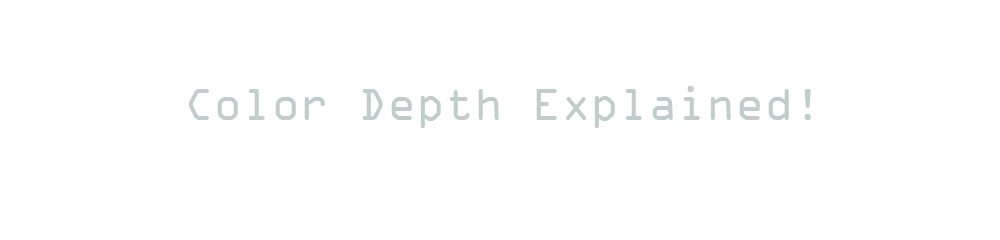
<style>
.page{position:relative;width:1000px;height:240px;background:#ffffff}
.page>*{position:absolute;margin:0}
.t1{font:48px "OCRAExtended";color:#c0cdcc}
</style>
<div class="page">
<p class="t1" style="left:189px;top:86px;width:622px;height:42px">Color Depth Explained!</p>
</div>
